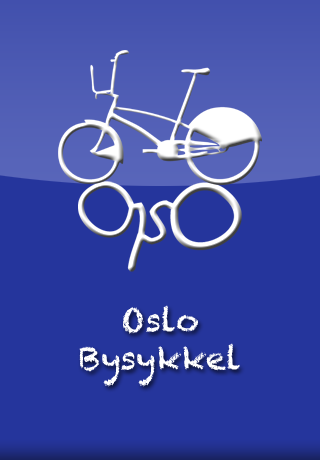
<style>
.page{position:relative;width:320px;height:460px;background:#25359c}
.page>*{position:absolute;margin:0}
.t1{font:32px "Chalkduster";color:#ffffff}
</style>
<div class="page">
<p class="t1" style="left:79px;top:305px;width:161px;height:82px;text-align:center">Oslo<br>Bysykkel</p>
</div>
